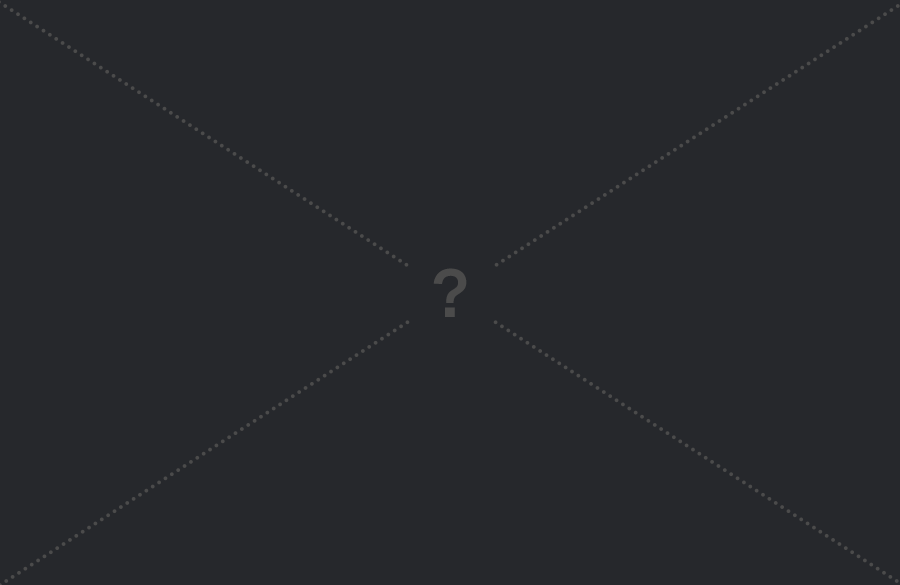
<style>
.page{position:relative;width:900px;height:585px;background:#26282c}
.page>*{position:absolute;margin:0}
.t1{font:66.7px "GeistMono-SemiBold";letter-spacing:-0.04em;color:#4b4b4b}
</style>
<div class="page">
<p class="t1" style="left:433px;top:268px;width:34px;height:49px">?</p>
</div>
